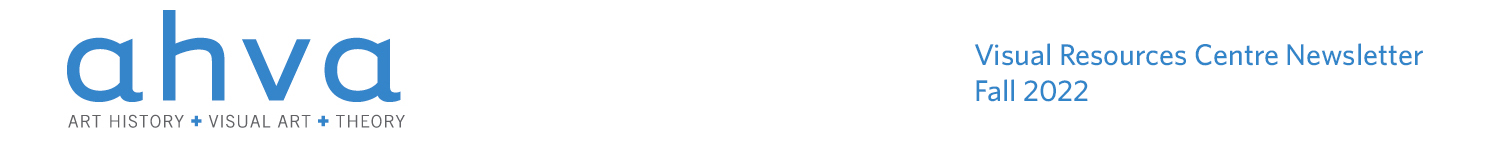
<style>
.page{position:relative;width:1500px;height:149px;background:#ffffff}
.page>*{position:absolute;margin:0}
.t1{font:30px "Whitney-Medium";color:#3285c9}
</style>
<div class="page">
<p class="t1" style="left:974px;top:43px;width:449px;height:59px">Visual Resources Centre Newsletter<br>Fall 2022</p>
</div>
